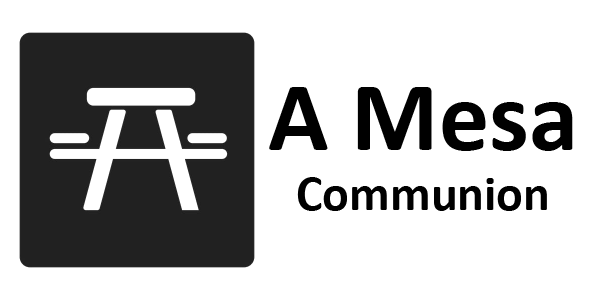
<style>
.page{position:relative;width:600px;height:300px;background:#ffffff}
.page>*{position:absolute;margin:0}
.t1{font:50px "Calibri-Bold";color:#000000}
.t2{font:100px "Calibri-Bold";color:#000000}
</style>
<div class="page">
<p class="t1" style="left:269px;top:87px;width:304px;height:124px;text-align:center"><span class="t2">A Mesa<br></span>Communion</p>
</div>
